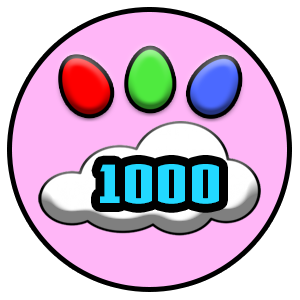
<style>
.page{position:relative;width:300px;height:300px;background:#ffb6f7}
.page>*{position:absolute;margin:0}
.t1{font:52.7px "IRONMANOFWAR002NCV";letter-spacing:0.01em;color:#22d8ff;scale:1.41 1}
</style>
<div class="page">
<p class="t1" style="left:100px;top:164px;width:119px;height:40px">1000</p>
</div>
